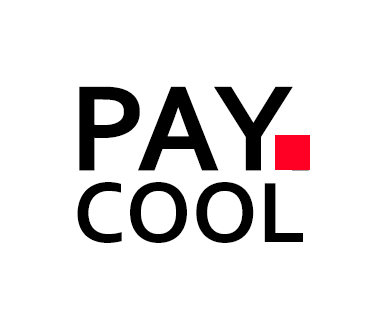
<style>
.page{position:relative;width:378px;height:323px;background:#ffffff}
.page>*{position:absolute;margin:0}
.t1{font:128px "Corbel-Bold";color:#000000}
.t2{font:90px "Corbel-Bold";color:#000000}
</style>
<div class="page">
<p class="t1" style="left:79px;top:86px;width:230px;height:85px">PAY.</p>
<p class="t2" style="left:77px;top:182px;width:226px;height:61px">COOL</p>
</div>
